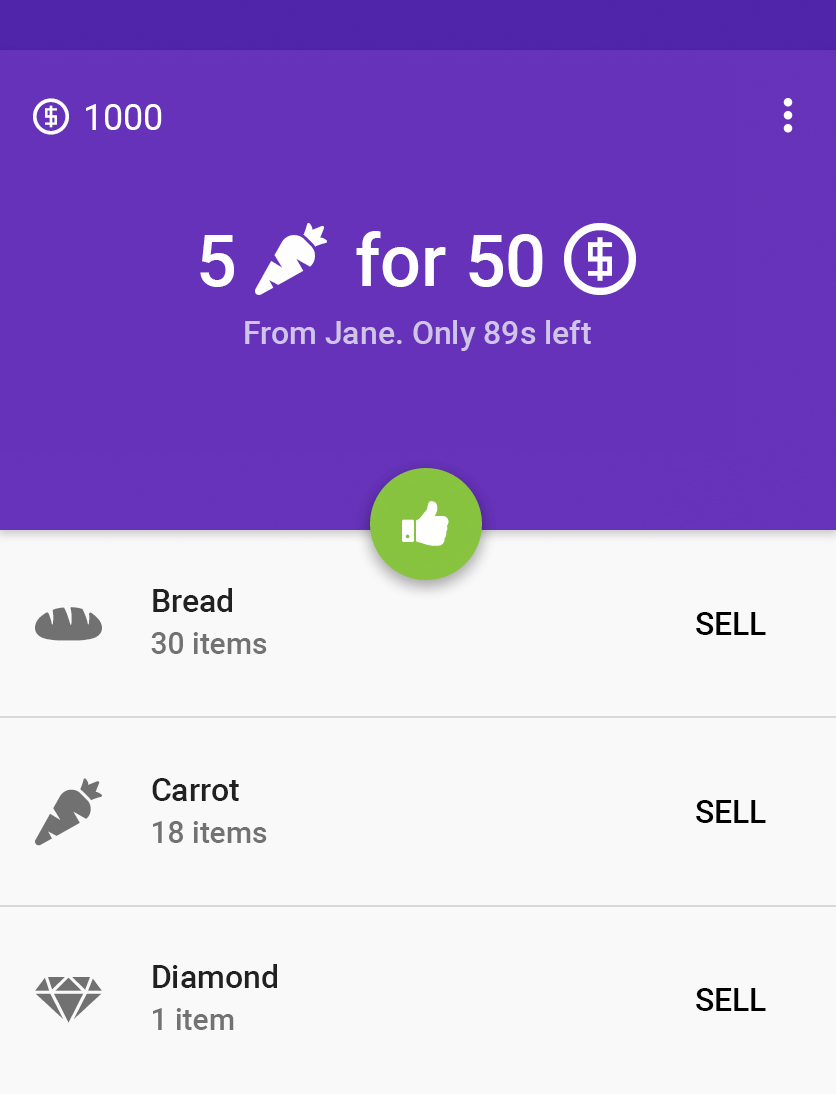
<style>
.page{position:relative;width:836px;height:1094px;background:#f9f9f9}
.page>*{position:absolute;margin:0}
.t1{font:32px "Roboto-Medium";color:#d1c4e9}
.t2{font:32px "Roboto-Medium";color:#212121}
.t3{font:32px "Roboto-Medium";color:#000000}
.t4{font:30px "Roboto-Medium";color:#727272}
</style>
<div class="page">
<p class="t1" style="left:245px;top:320px;width:346px;height:31px">From Jane. Only 89s left</p>
<p class="t2" style="left:153px;top:588px;width:79px;height:24px">Bread</p>
<p class="t3" style="left:696px;top:612px;width:70px;height:23px">SELL</p>
<p class="t4" style="left:151px;top:632px;width:116px;height:22px">30 items</p>
<p class="t2" style="left:152px;top:778px;width:87px;height:23px">Carrot</p>
<p class="t3" style="left:696px;top:800px;width:70px;height:23px">SELL</p>
<p class="t4" style="left:153px;top:821px;width:114px;height:22px">18 items</p>
<p class="t2" style="left:153px;top:964px;width:124px;height:24px">Diamond</p>
<p class="t3" style="left:696px;top:988px;width:70px;height:23px">SELL</p>
<p class="t4" style="left:153px;top:1008px;width:81px;height:22px">1 item</p>
</div>
